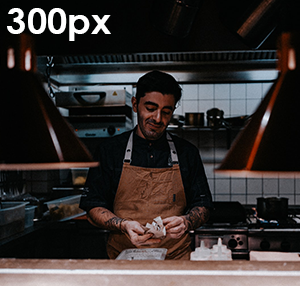
<style>
.page{position:relative;width:300px;height:286px}
.page>*{position:absolute;margin:0}
.t1{font:36px "CenturyGothic-Bold";color:#ffffff}
</style>
<div class="page">
<p class="t1" style="left:7px;top:8px;width:104px;height:33px">300px</p>
</div>
